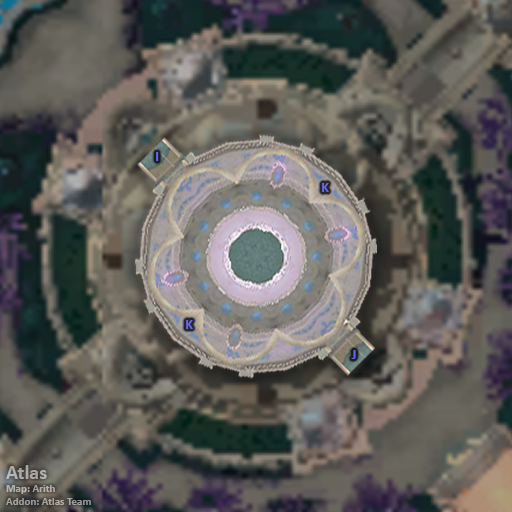
<style>
.page{position:relative;width:512px;height:512px}
.page>*{position:absolute;margin:0}
.t1{font:14px "Calibri-Bold";color:#6666ff}
.t2{font:11px "Calibri-Bold";color:#acaaa7}
.t3{font:20px "Calibri-Bold";color:#acaaa7}
</style>
<div class="page">
<p class="t1" style="left:156px;top:152px;width:3px;height:9px">I</p>
<p class="t1" style="left:322px;top:183px;width:7px;height:9px">K</p>
<p class="t1" style="left:186px;top:320px;width:7px;height:9px">K</p>
<p class="t1" style="left:351px;top:350px;width:5px;height:9px">J</p>
<p class="t2" style="left:6px;top:465px;width:85px;height:40px"><span class="t3">Atlas<br></span>Map: Arith<br>Addon: Atlas Team</p>
</div>
